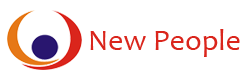
<style>
.page{position:relative;width:250px;height:80px;background:#ffffff}
.page>*{position:absolute;margin:0}
.t1{font:30px "Candara";color:#da251c}
</style>
<div class="page">
<p class="t1" style="left:90px;top:29px;width:150px;height:28px">New People</p>
</div>
